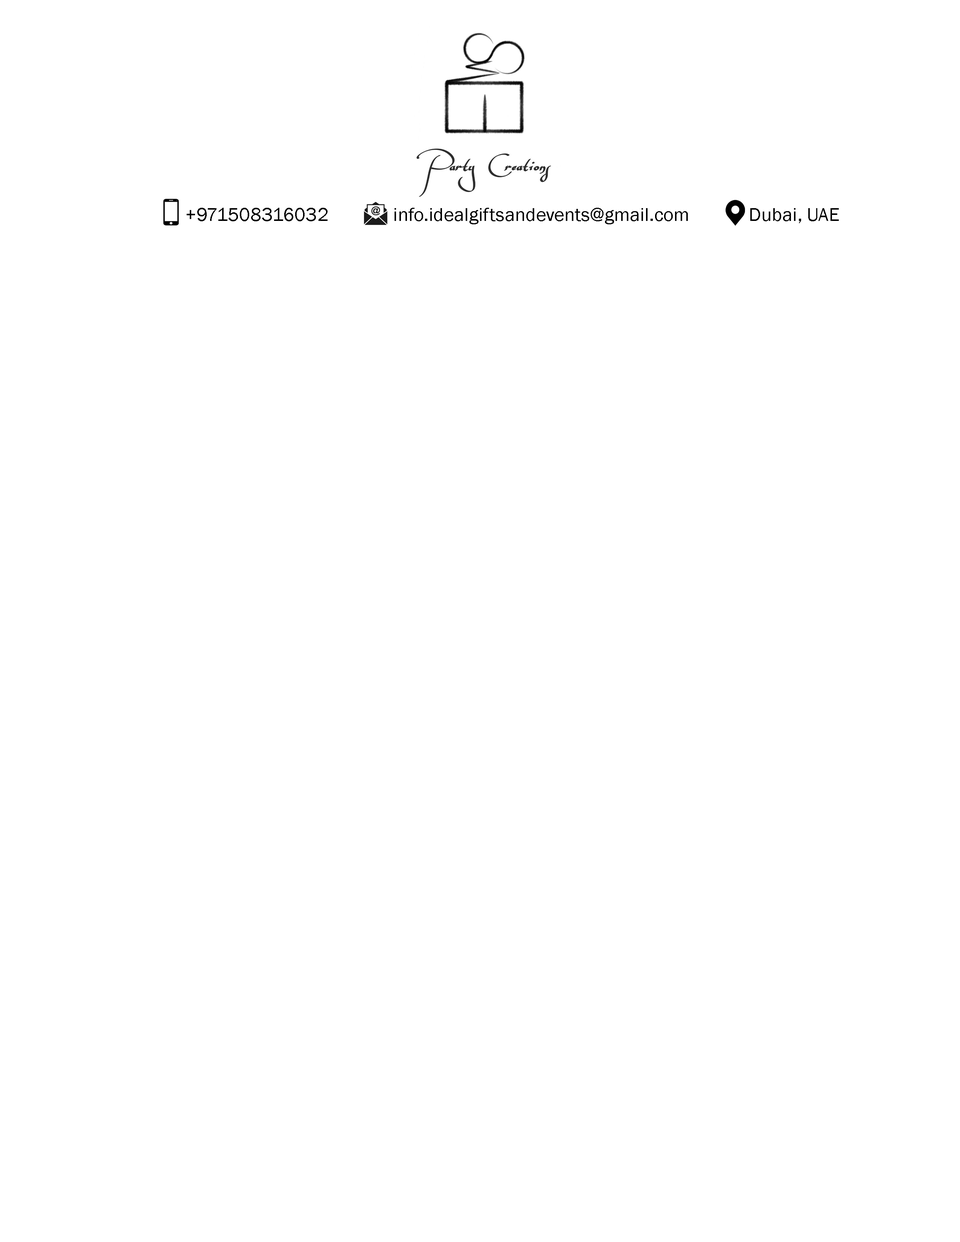
<style>
.page{position:relative;width:960px;height:1242px;background:#ffffff}
.page>*{position:absolute;margin:0}
.t1{font:19.1px "FranklinGothic-Book";letter-spacing:0.01em;color:#000000}
</style>
<div class="page">
<p class="t1" style="left:186px;top:208px;width:653px;height:16px">+971508316032             info.idealgiftsandevents@gmail.com            Dubai, UAE</p>
</div>
